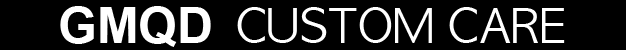
<style>
.page{position:relative;width:626px;height:50px;background:#000000}
.page>*{position:absolute;margin:0}
.t1{font:50px "Arial-BoldMT";color:#ffffff}
.t2{font:45px "MyriadPro-Regular";color:#ffffff}
</style>
<div class="page">
<p class="t1" style="left:60px;top:6px;width:151px;height:41px">GMQD</p>
<p class="t2" style="left:237px;top:7px;width:328px;height:36px">CUSTOM CARE</p>
</div>
